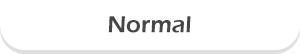
<style>
.page{position:relative;width:300px;height:54px;background:#ffffff}
.page>*{position:absolute;margin:0}
.t1{font:24px "ErasITC-Demi";color:#464646}
</style>
<div class="page">
<p class="t1" style="left:108px;top:16px;width:83px;height:17px">Normal</p>
</div>
